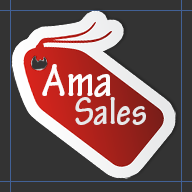
<style>
.page{position:relative;width:192px;height:192px;background:#333333}
.page>*{position:absolute;margin:0}
.t1{font:48px "TektonPro-BoldCond";color:#fdfdfd}
.t2{font:40px "TektonPro-BoldCond";color:#e7e8e9}
</style>
<div class="page">
<p class="t1" style="left:42px;top:64px;width:69px;height:33px">Ama</p>
<p class="t2" style="left:75px;top:97px;width:71px;height:28px">Sales</p>
</div>
